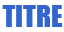
<style>
.page{position:relative;width:64px;height:32px;background:#ffffff}
.page>*{position:absolute;margin:0}
.t1{font:27.7px "Impact";color:#3366cc}
</style>
<div class="page">
<p class="t1" style="left:2px;top:5px;width:61px;height:22px">TITRE</p>
</div>
